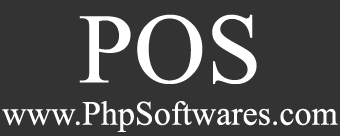
<style>
.page{position:relative;width:340px;height:136px;background:#333333}
.page>*{position:absolute;margin:0}
.t1{font:100px "TimesNewRomanPSMT";color:#ffffff}
.t2{font:34px "TimesNewRomanPSMT";color:#ffffff}
</style>
<div class="page">
<p class="t1" style="left:79px;top:14px;width:178px;height:70px">POS</p>
<p class="t2" style="left:2px;top:101px;width:336px;height:31px">www.PhpSoftwares.com</p>
</div>
